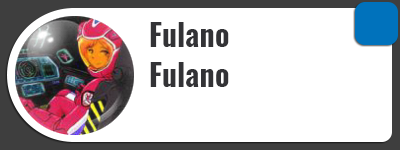
<style>
.page{position:relative;width:400px;height:150px;background:#ffffff}
.page>*{position:absolute;margin:0}
.t1{font:30px "Oswald-Bold";color:#333336}
</style>
<div class="page">
<p class="t1" style="left:150px;top:22px;width:79px;height:25px">Fulano</p>
<p class="t1" style="left:150px;top:62px;width:79px;height:25px">Fulano</p>
</div>
